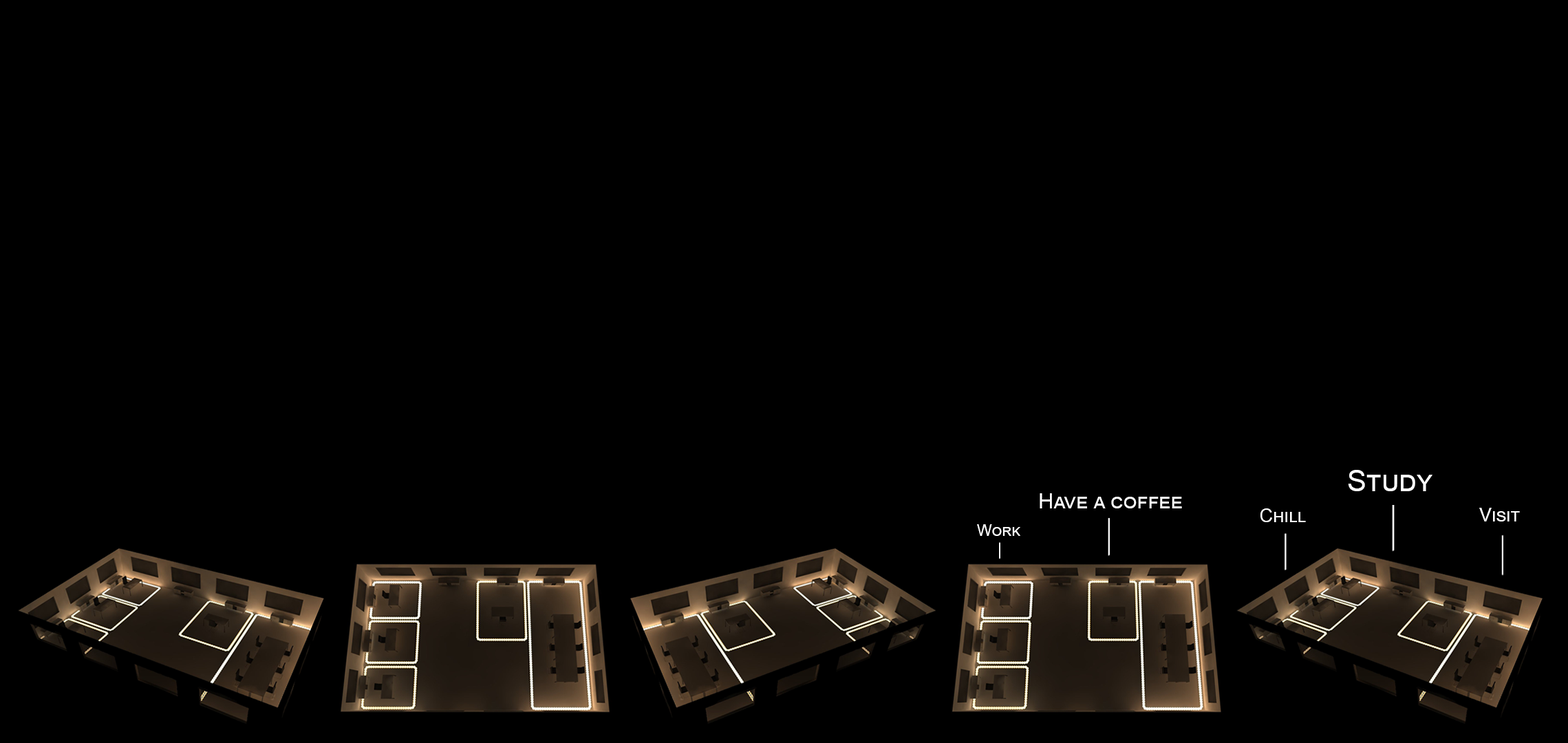
<style>
.page{position:relative;width:1568px;height:743px;background:#000000}
.page>*{position:absolute;margin:0}
.t1{font:29.2px "ArialMT";color:#ffffff;font-variant:small-caps}
.t2{font:21.2px "ArialMT";color:#ffffff;font-variant:small-caps}
.t3{font:18.9px "ArialMT";color:#ffffff;font-variant:small-caps}
.t4{font:18.6px "ArialMT";color:#ffffff;font-variant:small-caps}
.t5{font:15.6px "ArialMT";color:#ffffff;font-variant:small-caps}
</style>
<div class="page">
<p class="t1" style="left:1348px;top:470px;width:84px;height:21px">Study</p>
<p class="t2" style="left:1040px;top:493px;width:142px;height:15px">Have a coffee</p>
<p class="t3" style="left:1260px;top:508px;width:46px;height:14px">Chill</p>
<p class="t4" style="left:1479px;top:508px;width:41px;height:14px">Visit</p>
<p class="t5" style="left:977px;top:524px;width:43px;height:12px">Work</p>
</div>
